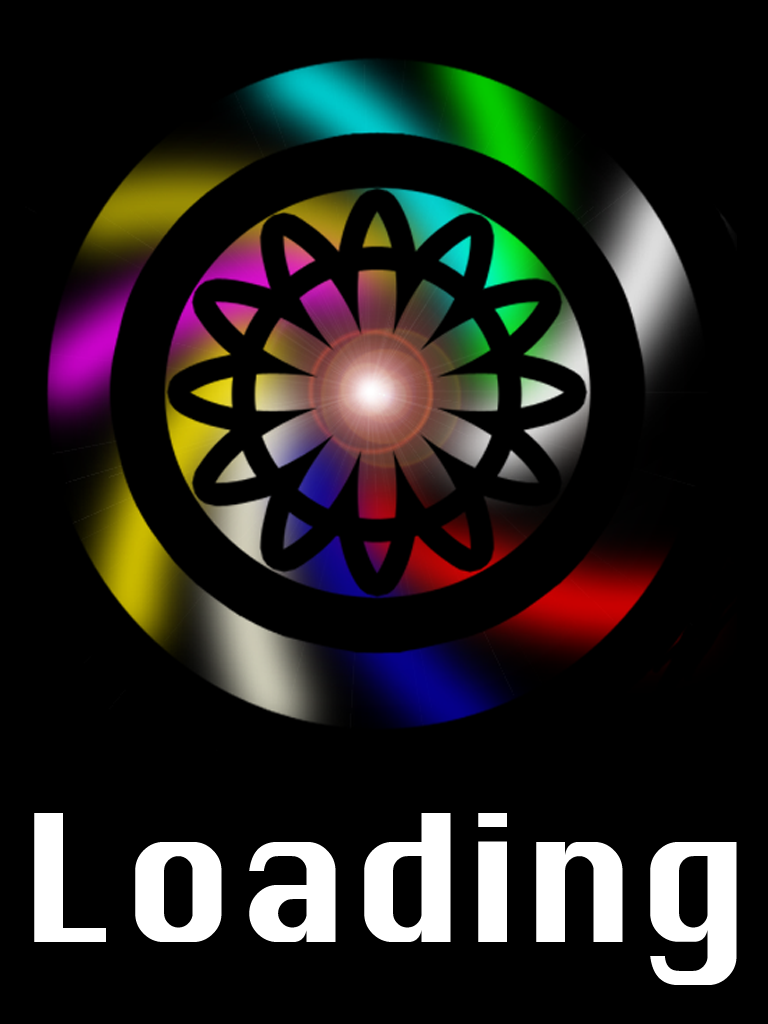
<style>
.page{position:relative;width:768px;height:1024px;background:#000000}
.page>*{position:absolute;margin:0}
.t1{font:172px "Krungthep";color:#ffffff}
</style>
<div class="page">
<p class="t1" style="left:34px;top:813px;width:703px;height:172px">Loading</p>
</div>
